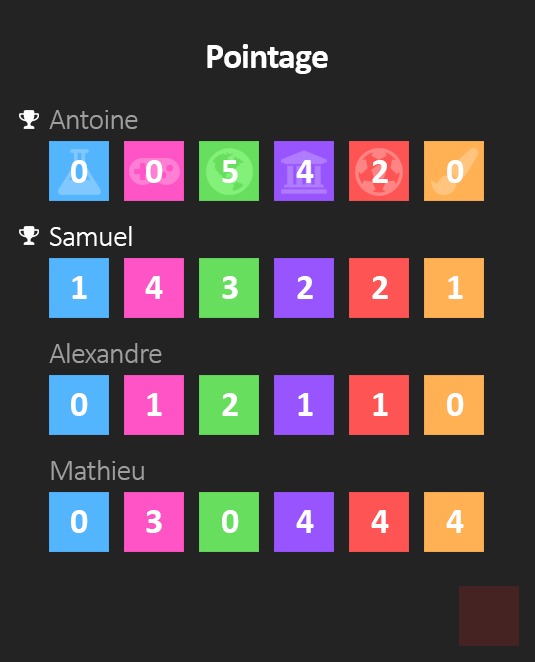
<style>
.page{position:relative;width:535px;height:662px;background:#232323}
.page>*{position:absolute;margin:0}
.t1{font:36px "Calibri-Bold";letter-spacing:-0.025em;color:#ffffff}
.t2{font:30px "Calibri-Light";letter-spacing:-0.025em;color:#9e9e9e}
.t3{font:30px "Calibri-Light";letter-spacing:-0.025em;color:#ffffff}
</style>
<div class="page">
<p class="t1" style="left:207px;top:44px;width:121px;height:30px">Pointage</p>
<p class="t2" style="left:49px;top:110px;width:89px;height:19px">Antoine</p>
<p class="t1" style="left:71px;top:160px;width:393px;height:23px">0        0        5        4        2        0</p>
<p class="t3" style="left:50px;top:226px;width:82px;height:20px">Samuel</p>
<p class="t1" style="left:72px;top:276px;width:391px;height:23px">1        4        3        2        2        1</p>
<p class="t2" style="left:49px;top:343px;width:113px;height:20px">Alexandre</p>
<p class="t1" style="left:71px;top:393px;width:393px;height:23px">0        1        2        1        1        0</p>
<p class="t2" style="left:51px;top:460px;width:93px;height:20px">Mathieu</p>
<p class="t1" style="left:71px;top:510px;width:393px;height:23px">0        3        0        4        4        4</p>
</div>
